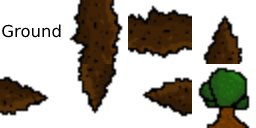
<style>
.page{position:relative;width:256px;height:128px;background:#ffffff}
.page>*{position:absolute;margin:0}
.t1{font:16.5px "DejaVuSans";color:#000000}
</style>
<div class="page">
<p class="t1" style="left:2px;top:24px;width:59px;height:14px">Ground</p>
</div>
